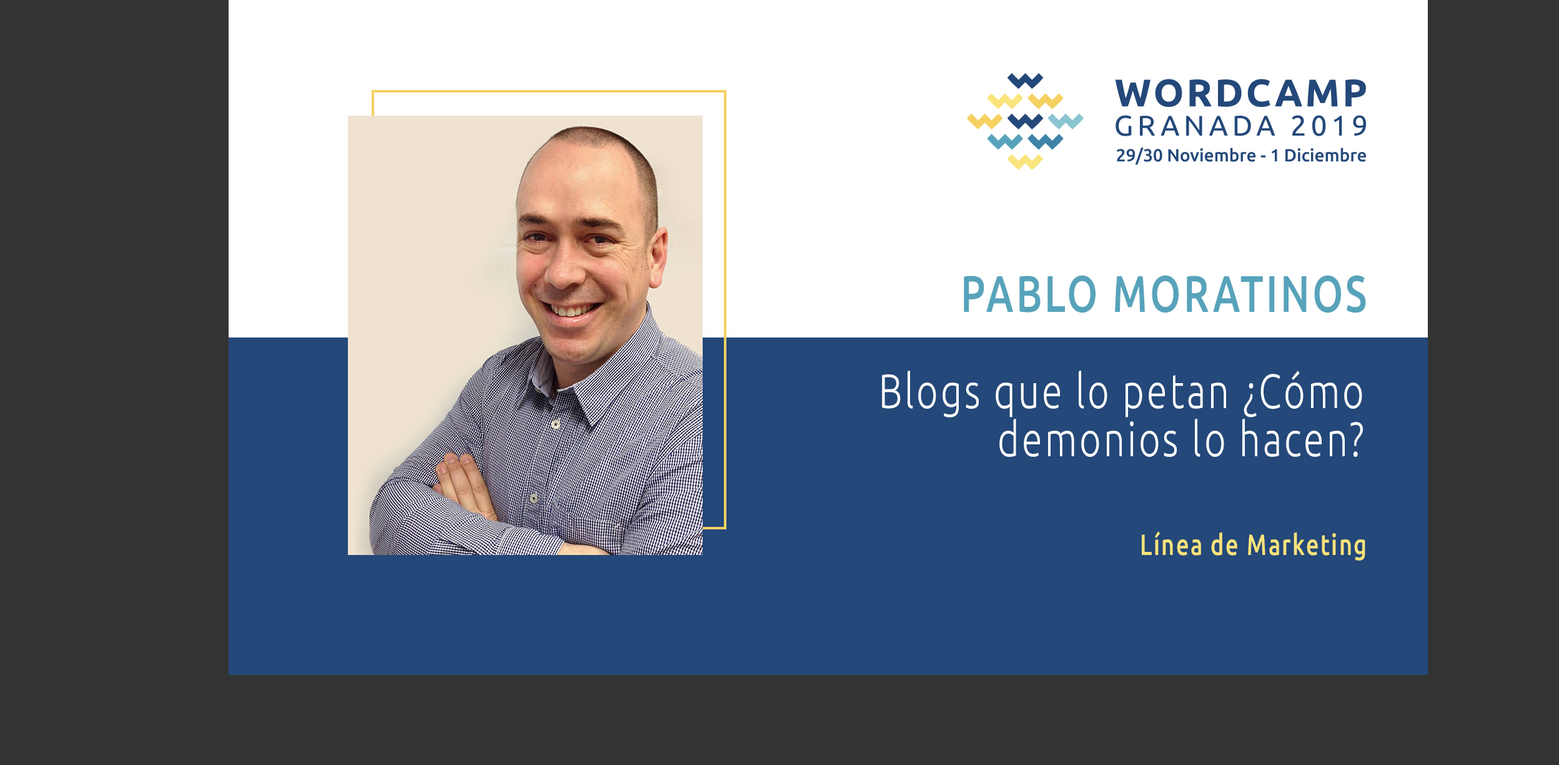
<style>
.page{position:relative;width:1559px;height:765px;background:#333333}
.page>*{position:absolute;margin:0}
.t1{font:51.4px "Ubuntu-Medium";letter-spacing:0.068em;color:#57a3bb;text-transform:uppercase;scale:0.77 1}
.t2{font:48.2px/48.2px "Ubuntu-Light";letter-spacing:0.068em;color:#ffffff;scale:0.77 1}
.t3{font:29.2px "Ubuntu-Medium";letter-spacing:0.068em;color:#f9e37b;scale:0.77 1}
</style>
<div class="page">
<p class="t1" style="left:964px;top:275px;width:402px;height:38px">Pablo Moratinos</p>
<p class="t2" style="left:882px;top:370px;width:481px;height:87px;text-align:right">Blogs que lo petan ¿Cómo demonios lo hacen?</p>
<p class="t3" style="left:1142px;top:531px;width:224px;height:29px">Línea de Marketing</p>
</div>
